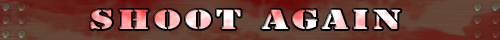
<style>
.page{position:relative;width:500px;height:40px}
.page>*{position:absolute;margin:0}
.t1{font:24.8px "StencilStd";letter-spacing:0.1em;scale:1.54 1}
</style>
<div class="page">
<p class="t1" style="left:91px;top:10px;width:310px;height:19px">SHOOT AGAIN</p>
</div>
